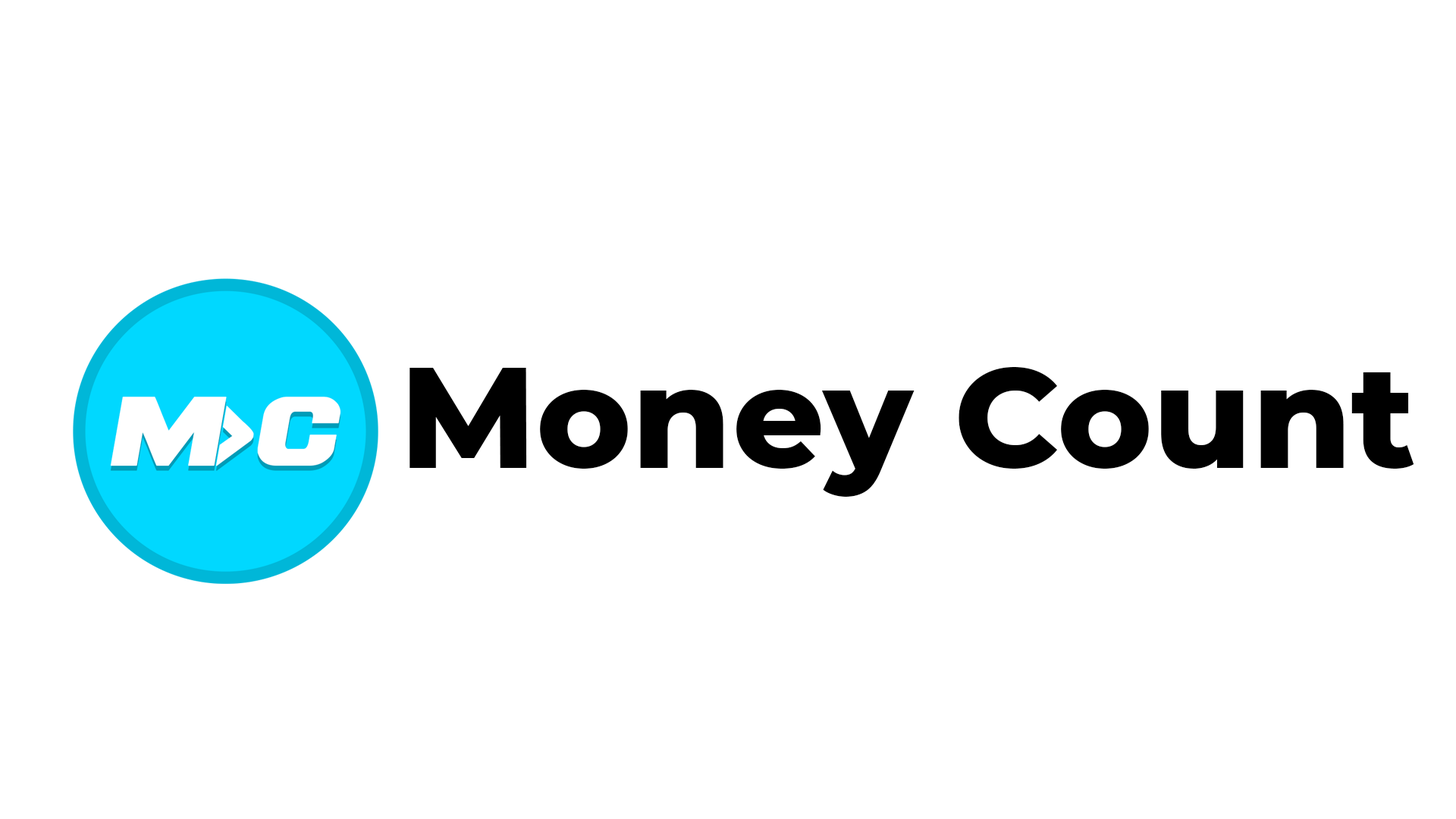
<style>
.page{position:relative;width:1456px;height:819px;background:#ffffff}
.page>*{position:absolute;margin:0}
.t1{font:143.3px "Montserrat-ExtraBold";color:#000000}
</style>
<div class="page">
<p class="t1" style="left:409px;top:367px;width:1005px;height:130px">Money Count</p>
</div>
